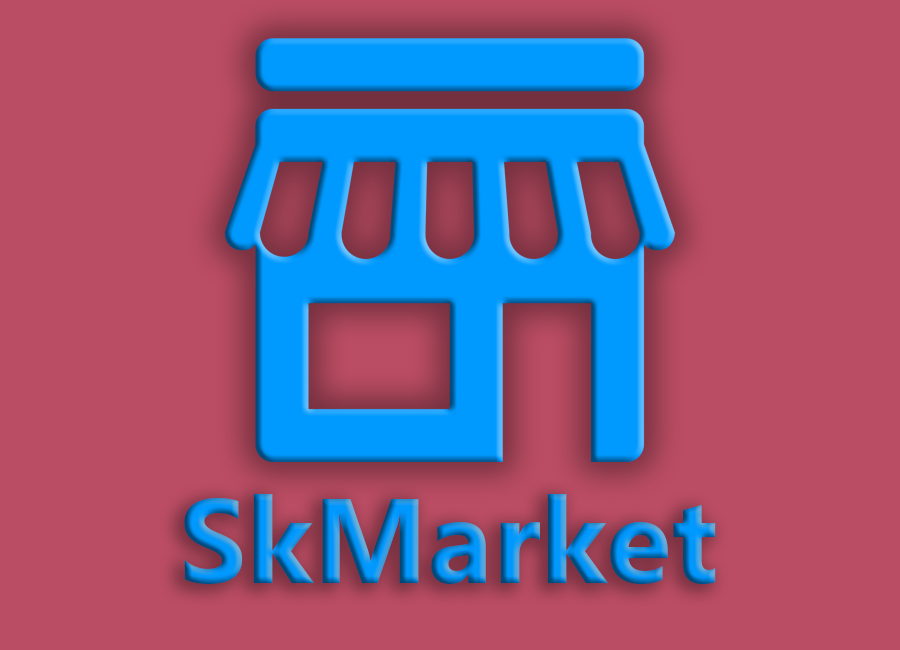
<style>
.page{position:relative;width:900px;height:650px;background:#ba4c63}
.page>*{position:absolute;margin:0}
.t1{font:120px "SegoeUI-Bold"}
</style>
<div class="page">
<p class="t1" style="left:184px;top:494px;width:532px;height:90px">SkMarket</p>
</div>
